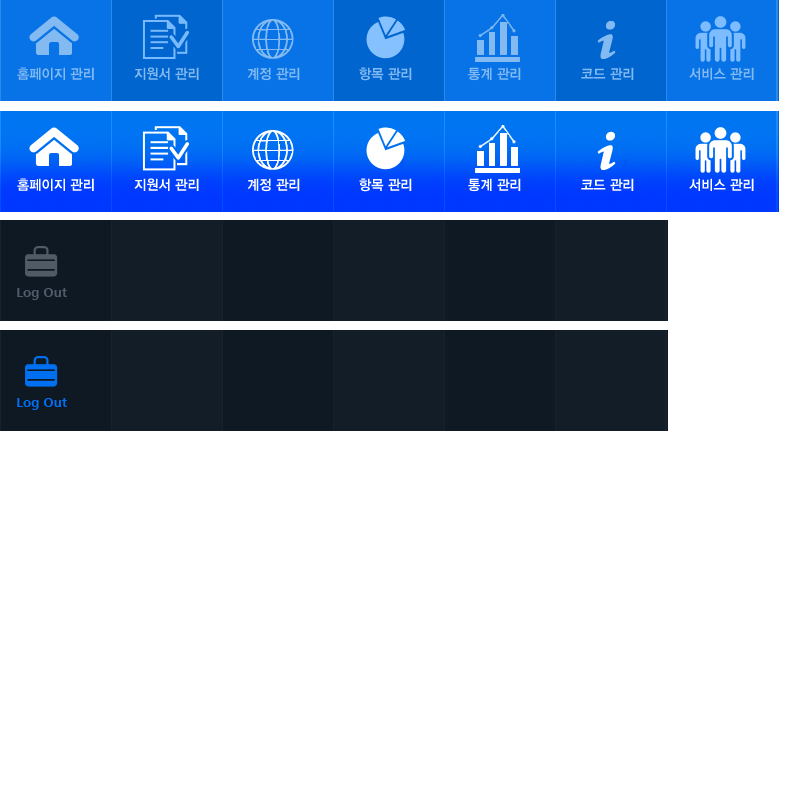
<style>
.page{position:relative;width:800px;height:800px;background:#ffffff}
.page>*{position:absolute;margin:0}
.t1{font:14px "YDIYGO340";color:#83baf2;scale:0.95 1}
.t2{font:14px "YDIYGO340";color:#ffffff;scale:0.95 1}
.t3{font:14px "FrugalSans-Bold";color:#4f5b68}
.t4{font:14px "FrugalSans-Bold";color:#006ff3}
</style>
<div class="page">
<p class="t1" style="left:17px;top:67px;width:77px;height:13px">홈페이지 관리</p>
<p class="t1" style="left:134px;top:67px;width:65px;height:13px">지원서 관리</p>
<p class="t1" style="left:247px;top:67px;width:53px;height:14px">계정 관리</p>
<p class="t1" style="left:359px;top:67px;width:53px;height:14px">항목 관리</p>
<p class="t1" style="left:468px;top:67px;width:53px;height:14px">통계 관리</p>
<p class="t1" style="left:581px;top:67px;width:53px;height:13px">코드 관리</p>
<p class="t1" style="left:689px;top:67px;width:65px;height:13px">서비스 관리</p>
<p class="t2" style="left:17px;top:178px;width:77px;height:13px">홈페이지 관리</p>
<p class="t2" style="left:134px;top:178px;width:65px;height:13px">지원서 관리</p>
<p class="t2" style="left:247px;top:178px;width:53px;height:14px">계정 관리</p>
<p class="t2" style="left:359px;top:178px;width:53px;height:14px">항목 관리</p>
<p class="t2" style="left:468px;top:178px;width:53px;height:14px">통계 관리</p>
<p class="t2" style="left:581px;top:178px;width:53px;height:13px">코드 관리</p>
<p class="t2" style="left:689px;top:178px;width:65px;height:13px">서비스 관리</p>
<p class="t3" style="left:17px;top:288px;width:50px;height:12px">Log Out</p>
<p class="t4" style="left:17px;top:398px;width:50px;height:12px">Log Out</p>
</div>
